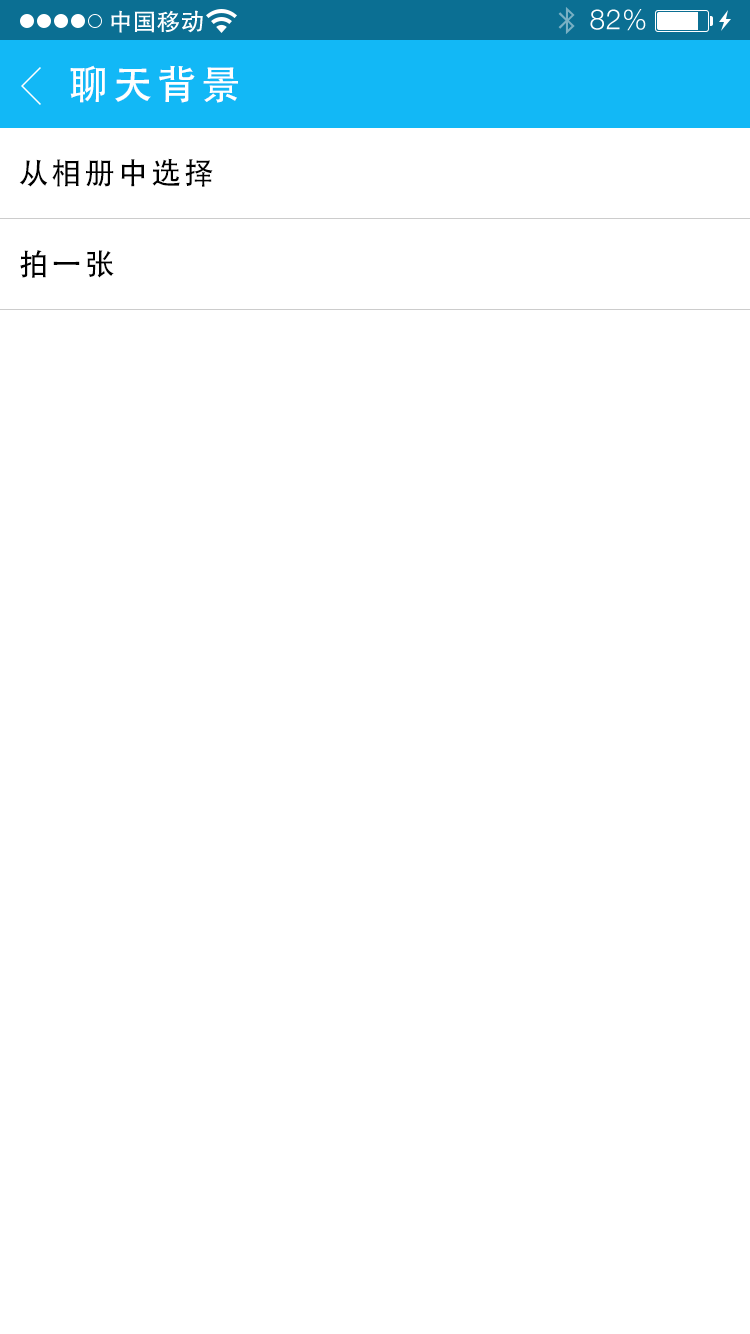
<style>
.page{position:relative;width:750px;height:1334px;background:#ffffff}
.page>*{position:absolute;margin:0}
.t1{font:40px "AdobeHeitiStd-Regular";letter-spacing:0.104em;color:#ffffff}
.t2{font:30px "AdobeHeitiStd-Regular";letter-spacing:0.104em;color:#000000}
</style>
<div class="page">
<p class="t1" style="left:70px;top:65px;width:168px;height:38px">聊天背景</p>
<p class="t2" style="left:19px;top:158px;width:194px;height:29px">从相册中选择</p>
<p class="t2" style="left:20px;top:250px;width:94px;height:28px">拍一张</p>
</div>
